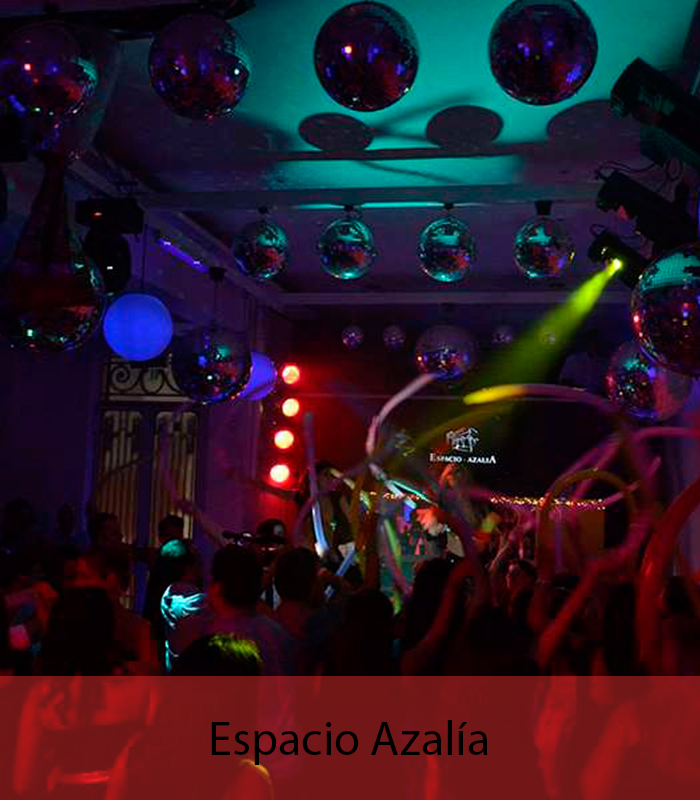
<style>
.page{position:relative;width:700px;height:800px}
.page>*{position:absolute;margin:0}
.t1{font:48px "MyriadPro-Regular";color:#000000}
</style>
<div class="page">
<p class="t1" style="left:211px;top:720px;width:277px;height:45px">Espacio Azalía</p>
</div>
